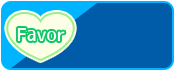
<style>
.page{position:relative;width:176px;height:72px;background:#005ca8}
.page>*{position:absolute;margin:0}
.t1{font:18px "JK-Gothic-M";color:#ffffff}
</style>
<div class="page">
<p class="t1" style="left:17px;top:28px;width:48px;height:14px">Favor</p>
</div>
